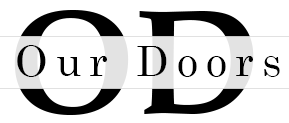
<style>
.page{position:relative;width:289px;height:123px;background:#ffffff}
.page>*{position:absolute;margin:0}
.t1{font:150px "BookAntiqua-Bold"}
.t2{font:41.7px "Century";letter-spacing:0.2em;color:#000000}
</style>
<div class="page">
<p class="t1" style="left:14px;top:10px;width:240px;height:105px">OD</p>
<p class="t2" style="left:17px;top:45px;width:263px;height:32px">Our Doors</p>
</div>
